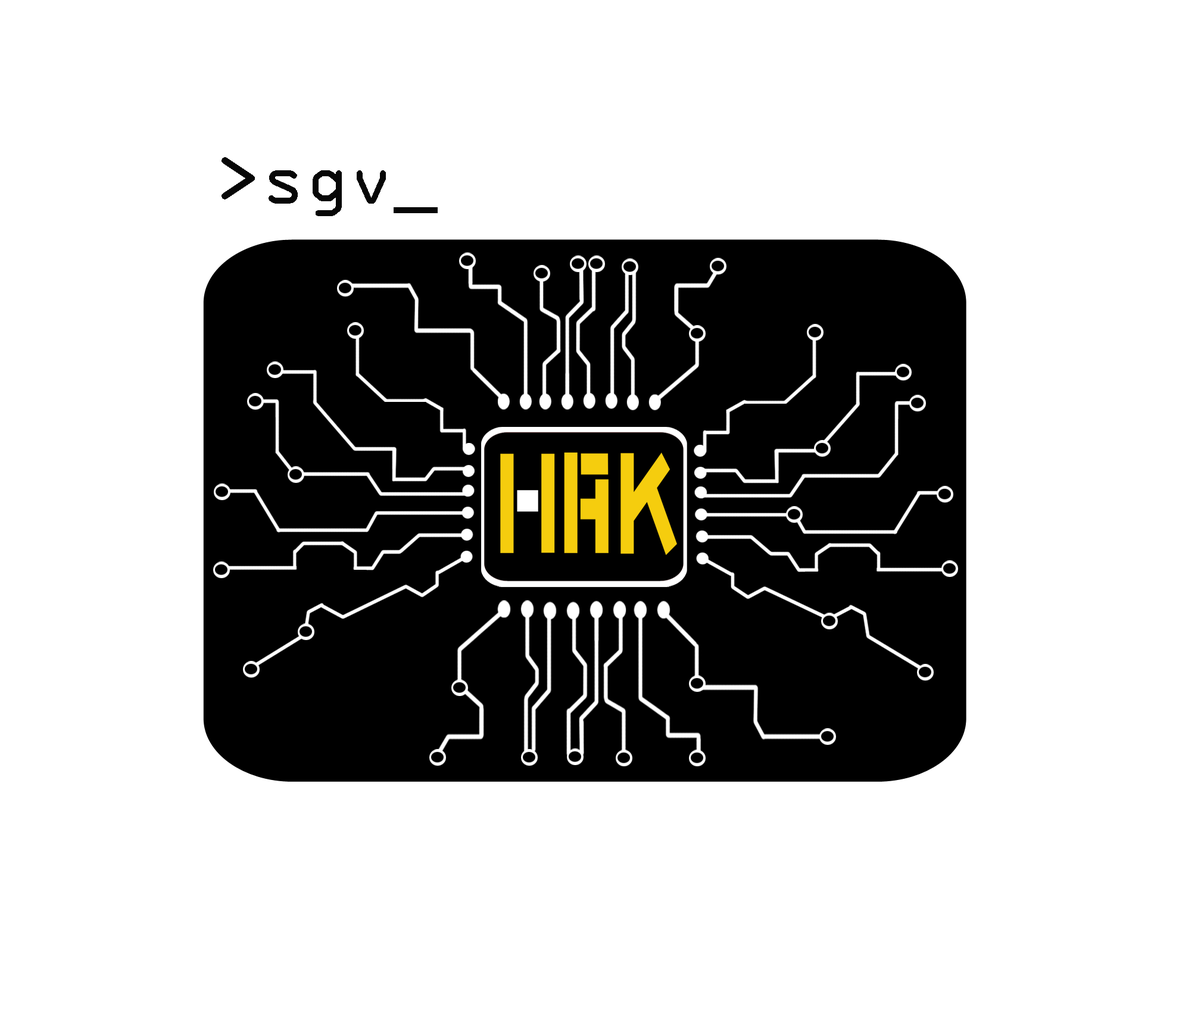
<style>
.page{position:relative;width:1179px;height:1011px;background:#ffffff}
.page>*{position:absolute;margin:0}
.t1{font:61.5px "OCRAStd";color:#070707}
</style>
<div class="page">
<p class="t1" style="left:222px;top:157px;width:216px;height:59px">&gt;sgv_</p>
</div>
